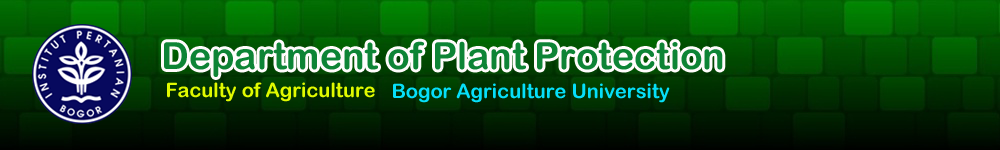
<style>
.page{position:relative;width:1000px;height:150px}
.page>*{position:absolute;margin:0}
.t1{font:37.5px "ArialRoundedMTBold";color:#0d8435}
.t2{font:20px "ArialRoundedMTBold";color:#e0fa00}
.t3{font:20px "ArialRoundedMTBold";color:#06dff9}
</style>
<div class="page">
<p class="t1" style="left:164px;top:41px;width:559px;height:36px">Department of Plant Protection</p>
<p class="t2" style="left:167px;top:82px;width:208px;height:20px">Faculty of Agriculture</p>
<p class="t3" style="left:393px;top:83px;width:277px;height:20px">Bogor Agriculture University</p>
</div>
